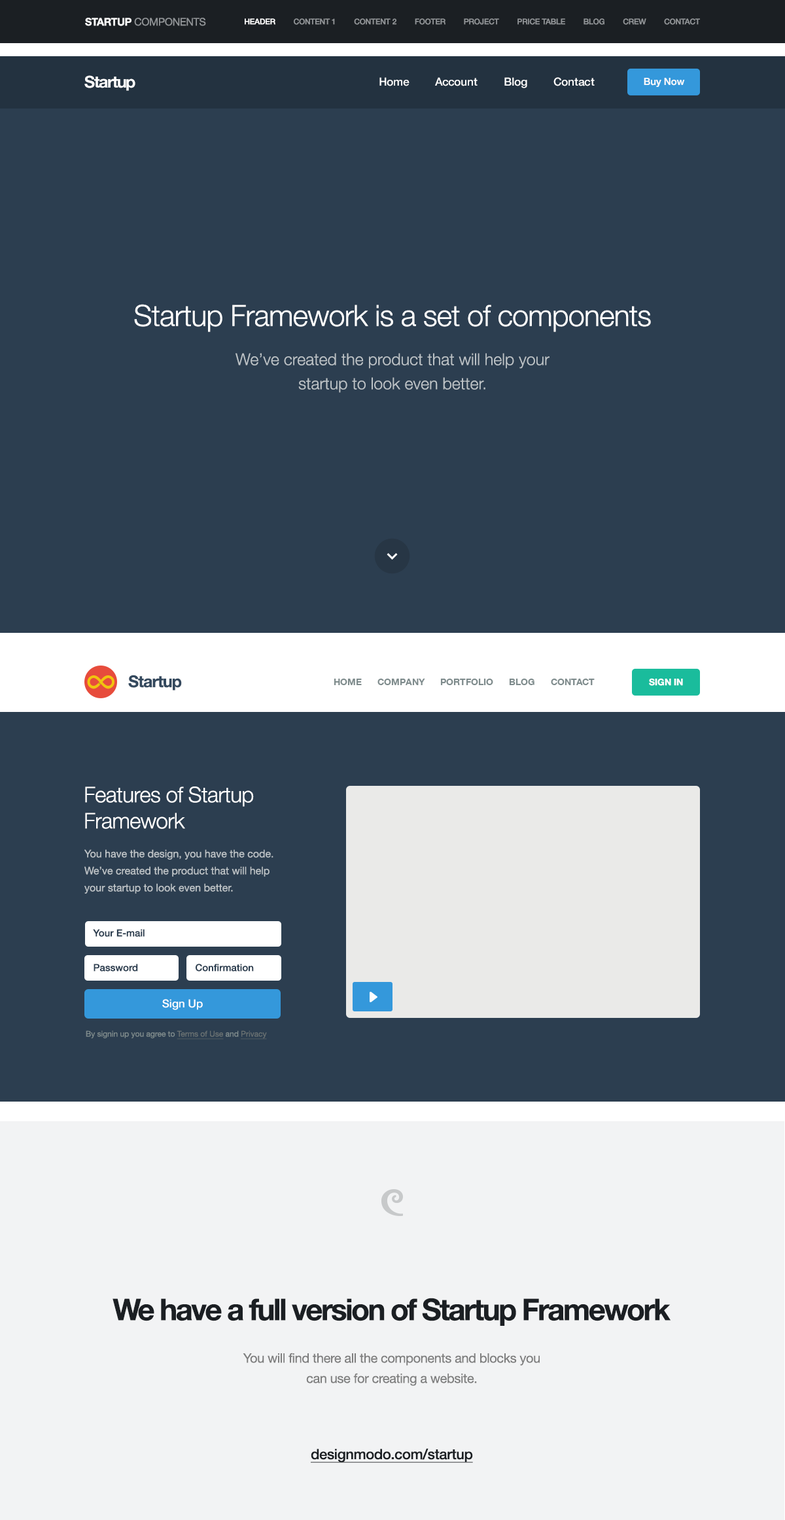
<style>
.page{position:relative;width:785px;height:1520px;background:#2c3e50}
.page>*{position:absolute;margin:0}
.t1{font:10.5px "HelveticaNeue";letter-spacing:-0.02em;color:#919497;text-transform:uppercase}
.t2{font:10.5px "HelveticaNeue-Bold";letter-spacing:-0.02em;color:#ffffff;text-transform:uppercase}
.t3{font:7.8px "HelveticaNeue-Medium";letter-spacing:-0.02em;color:#919497;text-transform:uppercase}
.t4{font:7.8px "HelveticaNeue-Medium";letter-spacing:-0.02em;color:#ffffff;text-transform:uppercase}
.t5{font:16.3px "HelveticaNeue-Bold";letter-spacing:-0.06em;color:#ffffff}
.t6{font:11.1px "HelveticaNeue-Medium";color:#ffffff}
.t7{font:9.8px "HelveticaNeue-Medium";color:#f9fafb}
.t8{font:29.4px "HelveticaNeue-Light";letter-spacing:-0.02em;color:#ffffff}
.t9{font:16.3px/24.2px "HelveticaNeue-Light";color:#bdc3c7}
.t10{font:16.3px "HelveticaNeue-Bold";letter-spacing:-0.04em;color:#34495e}
.t11{font:9.2px "HelveticaNeue-Bold";color:#ffffff;text-transform:uppercase}
.t12{font:9.2px "HelveticaNeue-Bold";color:#7f8c8d;text-transform:uppercase}
.t13{font:21.6px/26.2px "HelveticaNeue-Light";letter-spacing:-0.02em;color:#ffffff}
.t14{font:10.5px/17px "HelveticaNeue";color:#bdc3c7}
.t15{font:9.8px "HelveticaNeue-Medium";color:#2c3e50}
.t16{font:7.8px "HelveticaNeue";color:#7f8c8d}
.t17{font:7.8px "HelveticaNeue";color:#697172;text-decoration:underline}
.t18{font:30.1px "HelveticaNeue-Bold";letter-spacing:-0.06em;color:#1b1f23}
.t19{font:13.1px/20.3px "HelveticaNeue";letter-spacing:-0.02em;color:#7e7e7e}
.t20{font:14.4px "HelveticaNeue-Medium";letter-spacing:-0.02em;color:#1b1f23;text-decoration:underline}
</style>
<div class="page">
<p class="t1" style="left:85px;top:18px;width:121px;height:8px"><span class="t2">Startup </span>components</p>
<p class="t3" style="left:245px;top:18px;width:455px;height:7px"><span class="t4">header         </span>content 1         content 2         footer         project         price table         blog         crew         contact</p>
<p class="t5" style="left:84px;top:75px;width:51px;height:16px">Startup</p>
<p class="t6" style="left:379px;top:77px;width:215px;height:11px">Home        Account        Blog        Contact</p>
<p class="t7" style="left:643px;top:78px;width:41px;height:9px">Buy Now</p>
<p class="t8" style="left:134px;top:304px;width:516px;height:28px">Startup Framework is a set of components</p>
<p class="t9" style="left:235px;top:353px;width:314px;height:40px;text-align:center">We’ve created the product that will help your<br>startup to look even better.</p>
<p class="t10" style="left:128px;top:675px;width:54px;height:15px">Startup</p>
<p class="t11" style="left:649px;top:678px;width:34px;height:8px">sign in</p>
<p class="t12" style="left:333px;top:679px;width:261px;height:6px">home      company      portfolio      blog      contact</p>
<p class="t13" style="left:85px;top:786px;width:169px;height:43px">Features of Startup Framework</p>
<p class="t14" style="left:84px;top:849px;width:189px;height:45px">You have the design, you have the code. We’ve created the product that will help your startup to look even better.</p>
<p class="t15" style="left:93px;top:929px;width:51px;height:8px">Your E-mail</p>
<p class="t15" style="left:93px;top:964px;width:45px;height:7px">Password</p>
<p class="t15" style="left:195px;top:964px;width:59px;height:7px">Confirmation</p>
<p class="t6" style="left:162px;top:999px;width:41px;height:11px">Sign Up</p>
<p class="t16" style="left:86px;top:1030px;width:181px;height:9px">By signin up you agree to <span class="t17">Terms of Use </span>and <span class="t17">Privacy Policy</span></p>
<p class="t18" style="left:112px;top:1298px;width:559px;height:28px">We have a full version of Startup Framework</p>
<p class="t19" style="left:243px;top:1353px;width:296px;height:33px;text-align:center">You will find there all the components and blocks you can use for creating a website.</p>
<p class="t20" style="left:311px;top:1448px;width:162px;height:15px">designmodo.com/startup</p>
</div>
